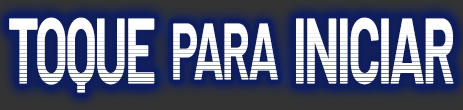
<style>
.page{position:relative;width:463px;height:110px;background:#0d1d5e}
.page>*{position:absolute;margin:0}
.t1{font:93px "Barlow-Bold";letter-spacing:-0.05em;color:#ffffff;scale:0.57 1}
.t2{font:80px "Barlow-Bold";letter-spacing:-0.05em;color:#ffffff;scale:0.57 1}
</style>
<div class="page">
<p class="t1" style="left:9px;top:17px;width:146px;height:76px">TOQUE</p>
<p class="t1" style="left:296px;top:17px;width:158px;height:68px">INICIAR</p>
<p class="t2" style="left:173px;top:23px;width:105px;height:57px">PARA</p>
</div>
